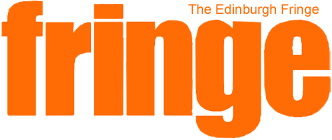
<style>
.page{position:relative;width:332px;height:140px;background:#ff6c05}
.page>*{position:absolute;margin:0}
.t1{font:13.5px "ArialMT";color:#ff6c05}
</style>
<div class="page">
<p class="t1" style="left:188px;top:4px;width:131px;height:13px">The Edinburgh Fringe</p>
</div>
